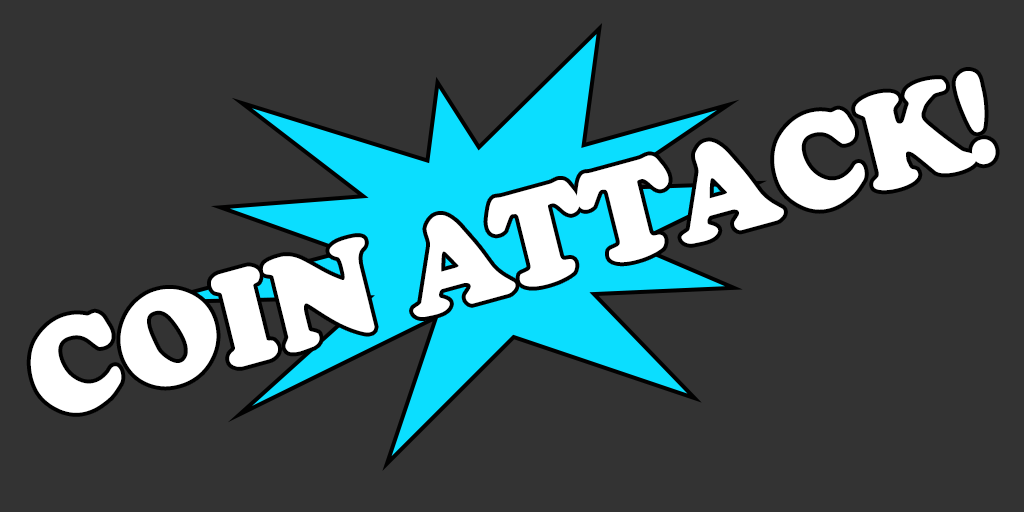
<style>
.page{position:relative;width:1024px;height:512px;background:#333333}
.page>*{position:absolute;margin:0}
.t1{font:118.1px "Coolsville";color:#ffffff;scale:0.95 1}
</style>
<div class="page">
<p class="t1" style="left:30px;top:71px;width:966px;height:342px;rotate:-15deg">COIN ATTACK!</p>
</div>
